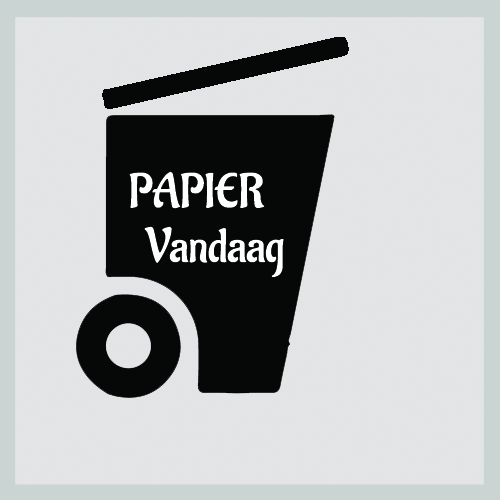
<style>
.page{position:relative;width:500px;height:500px;background:#e2e4e6}
.page>*{position:absolute;margin:0}
.t1{font:48px "Aladin-Regular";color:#ffffff}
</style>
<div class="page">
<p class="t1" style="left:129px;top:171px;width:136px;height:38px">PAPIER</p>
<p class="t1" style="left:144px;top:226px;width:140px;height:51px">Vandaag</p>
</div>
